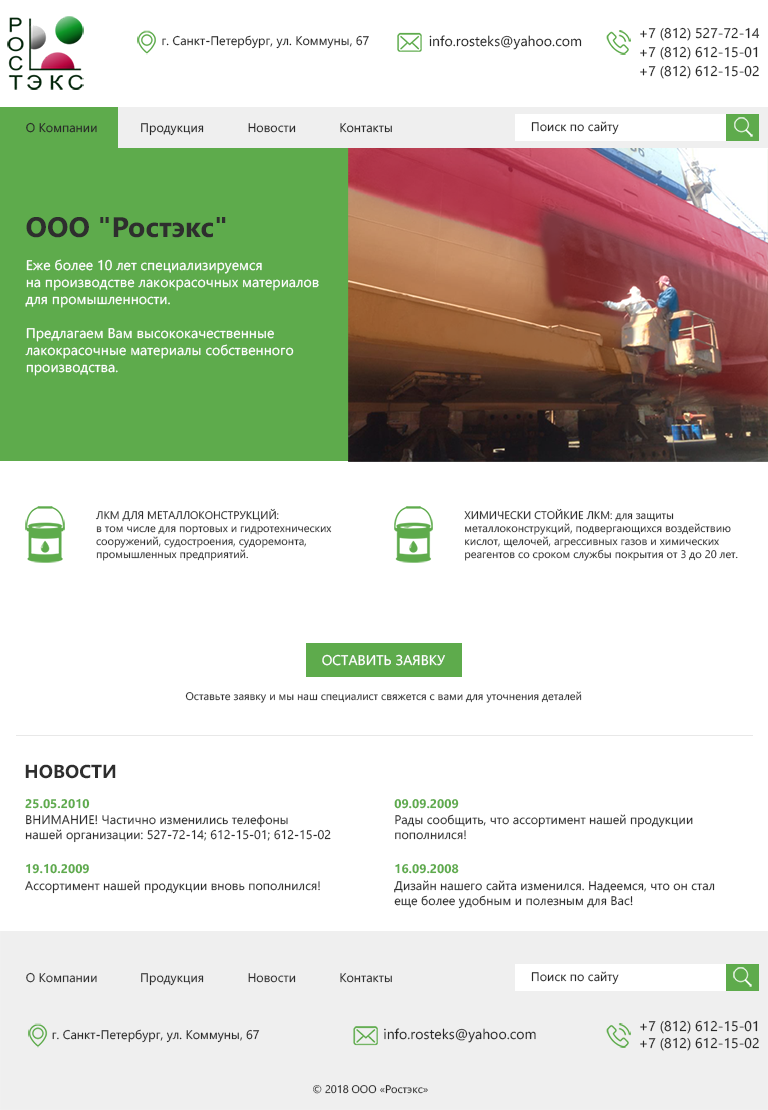
<style>
.page{position:relative;width:768px;height:1110px;background:#ffffff}
.page>*{position:absolute;margin:0}
.t1{font:14.1px/18.8px "SegoeUI";color:#282828}
.t2{font:12.5px "SegoeUI";color:#282828}
.t3{font:14.1px "SegoeUI";color:#282828}
.t4{font:14.1px "SegoeUI";color:#ffffff}
.t5{font:28.2px "SegoeUI-Bold";color:#2e2e2e}
.t6{font:11px "SegoeUI";color:#2e2e2e}
.t7{font:18.8px "SegoeUI-Bold";color:#2e2e2e}
.t8{font:12.5px "SegoeUI-Bold";color:#5eab4c}
.t9{font:12.5px "SegoeUI";color:#2e2e2e}
.t10{font:11px "SegoeUI";color:#282828}
</style>
<div class="page">
<p class="t1" style="left:640px;top:27px;width:120px;height:52px">+7 (812) 527-72-14 <br>+7 (812) 612-15-01 <br>+7 (812) 612-15-02</p>
<p class="t2" style="left:162px;top:35px;width:207px;height:14px">г. Санкт-Петербург, ул. Коммуны, 67</p>
<p class="t3" style="left:429px;top:35px;width:153px;height:15px">info.rosteks@yahoo.com</p>
<p class="t2" style="left:26px;top:122px;width:71px;height:11px">О Компании</p>
<p class="t2" style="left:141px;top:123px;width:63px;height:13px">Продукция</p>
<p class="t2" style="left:248px;top:123px;width:48px;height:10px">Новости</p>
<p class="t2" style="left:340px;top:123px;width:52px;height:10px">Контакты</p>
<p class="t2" style="left:531px;top:121px;width:88px;height:14px">Поиск по сайту</p>
<p class="t4" style="left:25px;top:217px;width:294px;height:159px"><span class="t5">ООО "Ростэкс"<br></span><br>Eже более 10 лет специализируемся<br>на производстве лакокрасочных материалов<br>для промышленности.<br><br>Предлагаем Вам высококачественные<br>лакокрасочные материалы собственного<br>производства.</p>
<p class="t6" style="left:95px;top:508px;width:237px;height:53px">ЛКМ ДЛЯ МЕТАЛЛОКОНСТРУКЦИЙ:<br>в том числе для портовых и гидротехнических<br>сооружений, судостроения, судоремонта,<br>промышленных предприятий.</p>
<p class="t6" style="left:464px;top:508px;width:274px;height:53px">ХИМИЧЕСКИ СТОЙКИЕ ЛКМ: для защиты<br>металлоконструкций, подвергающихся воздействию<br>кислот, щелочей, агрессивных газов и химических<br>реагентов со сроком службы покрытия от 3 до 20 лет.</p>
<p class="t4" style="left:322px;top:654px;width:123px;height:12px">ОСТАВИТЬ ЗАЯВКУ</p>
<p class="t6" style="left:185px;top:691px;width:397px;height:12px">Оставьте заявку и мы наш специалист свяжется с вами для уточнения деталей</p>
<p class="t7" style="left:25px;top:764px;width:91px;height:15px">НОВОСТИ</p>
<p class="t8" style="left:25px;top:798px;width:65px;height:11px">25.05.2010</p>
<p class="t8" style="left:394px;top:799px;width:65px;height:10px">09.09.2009</p>
<p class="t9" style="left:25px;top:814px;width:306px;height:29px">ВНИМАНИЕ! Частично изменились телефоны<br>нашей организации: 527-72-14; 612-15-01; 612-15-02</p>
<p class="t9" style="left:395px;top:814px;width:298px;height:26px">Рады сообщить, что ассортимент нашей продукции<br>пополнился!</p>
<p class="t8" style="left:26px;top:863px;width:63px;height:11px">19.10.2009</p>
<p class="t8" style="left:395px;top:863px;width:64px;height:11px">16.09.2008</p>
<p class="t9" style="left:25px;top:880px;width:295px;height:14px">Ассортимент нашей продукции вновь пополнился!</p>
<p class="t9" style="left:394px;top:880px;width:321px;height:29px">Дизайн нашего сайта изменился. Надеемся, что он стал<br>еще более удобным и полезным для Вас!</p>
<p class="t9" style="left:26px;top:972px;width:71px;height:11px">О Компании</p>
<p class="t9" style="left:141px;top:973px;width:63px;height:13px">Продукция</p>
<p class="t9" style="left:248px;top:973px;width:48px;height:10px">Новости</p>
<p class="t9" style="left:340px;top:973px;width:52px;height:10px">Контакты</p>
<p class="t2" style="left:531px;top:971px;width:88px;height:14px">Поиск по сайту</p>
<p class="t3" style="left:640px;top:1020px;width:119px;height:31px">+7 (812) 612-15-01<br>+7 (812) 612-15-02</p>
<p class="t2" style="left:52px;top:1029px;width:208px;height:14px">г. Санкт-Петербург, ул. Коммуны, 67</p>
<p class="t3" style="left:384px;top:1028px;width:152px;height:15px">info.rosteks@yahoo.com</p>
<p class="t10" style="left:313px;top:1084px;width:115px;height:10px">© 2018 ООО «Ростэкс»</p>
</div>
